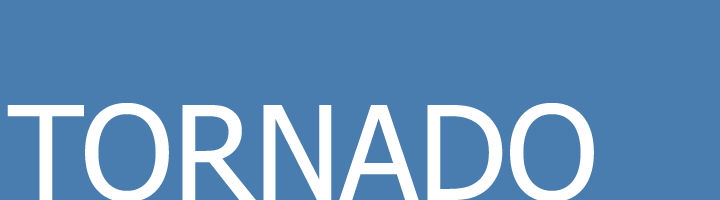
<style>
.page{position:relative;width:720px;height:200px;background:#497daf}
.page>*{position:absolute;margin:0}
.t1{font:130px "Tahoma";color:#ffffff}
</style>
<div class="page">
<p class="t1" style="left:7px;top:103px;width:587px;height:99px">TORNADO</p>
</div>
